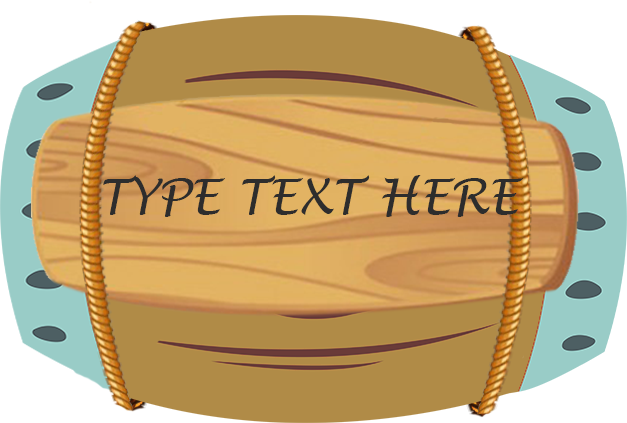
<style>
.page{position:relative;width:627px;height:423px;background:#b08b47}
.page>*{position:absolute;margin:0}
.t1{font:48px "LucidaHandwriting-Italic";color:#2d2d2d;text-transform:uppercase}
</style>
<div class="page">
<p class="t1" style="left:103px;top:175px;width:420px;height:42px">Type Text here</p>
</div>
